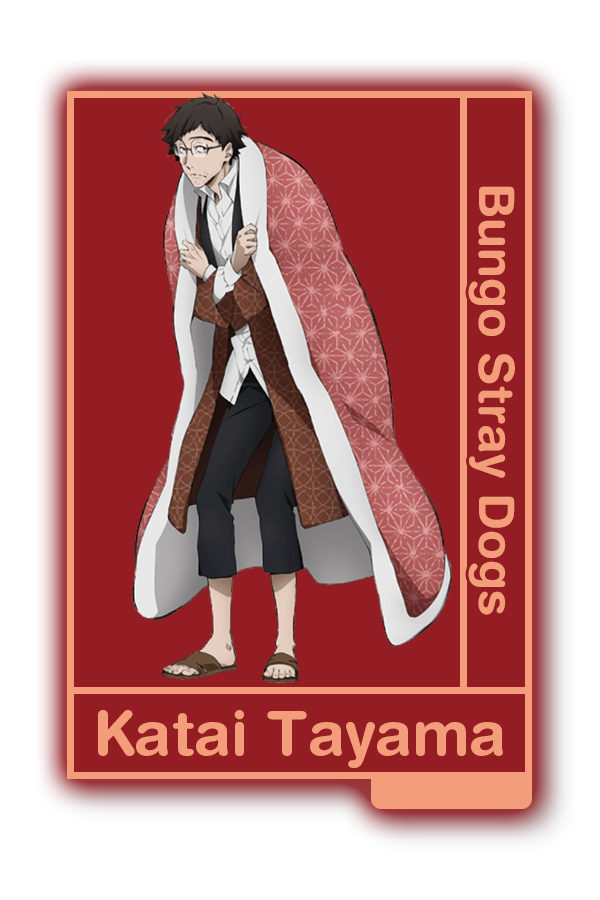
<style>
.page{position:relative;width:600px;height:900px;background:#941d23}
.page>*{position:absolute;margin:0}
.t1{font:48.8px "HelveticaRounded-Bold";color:#f39d7b}
.t2{font:60.9px "HelveticaRounded-Bold";color:#f39d7b}
</style>
<div class="page">
<p class="t1" style="left:468px;top:186px;width:47px;height:429px;rotate:90deg">Bungo Stray Dogs</p>
<p class="t2" style="left:98px;top:710px;width:405px;height:58px">Katai Tayama</p>
</div>
